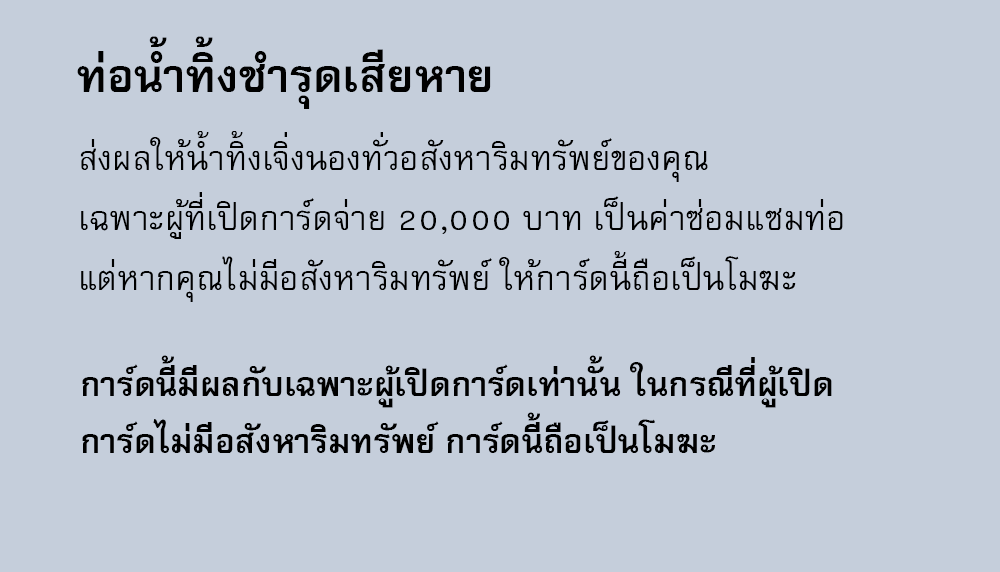
<style>
.page{position:relative;width:1000px;height:572px;background:#c5cedb}
.page>*{position:absolute;margin:0}
.t1{font:64px "FreesiaUPCBold";color:#000000}
.t2{font:48px/60px "FreesiaUPC";color:#000000}
.t3{font:47px "FreesiaUPCBold";color:#000000}
</style>
<div class="page">
<p class="t1" style="left:77px;top:36px;width:414px;height:73px">ท่อน้ำทิ้งชำรุดเสียหาย</p>
<p class="t2" style="left:80px;top:131px;width:763px;height:171px">ส่งผลให้น้ำทิ้งเจิ่งนองทั่วอสังหาริมทรัพย์ของคุณ<br>เฉพาะผู้ที่เปิดการ์ดจ่าย 20,000 บาท เป็นค่าซ่อมแซมท่อ<br>แต่หากคุณไม่มีอสังหาริมทรัพย์ ให้การ์ดนี้ถือเป็นโมฆะ</p>
<p class="t3" style="left:82px;top:355px;width:750px;height:98px">การ์ดนี้มีผลกับเฉพาะผู้เปิดการ์ดเท่านั้น ในกรณีที่ผู้เปิด<br>การ์ดไม่มีอสังหาริมทรัพย์ การ์ดนี้ถือเป็นโมฆะ</p>
</div>
